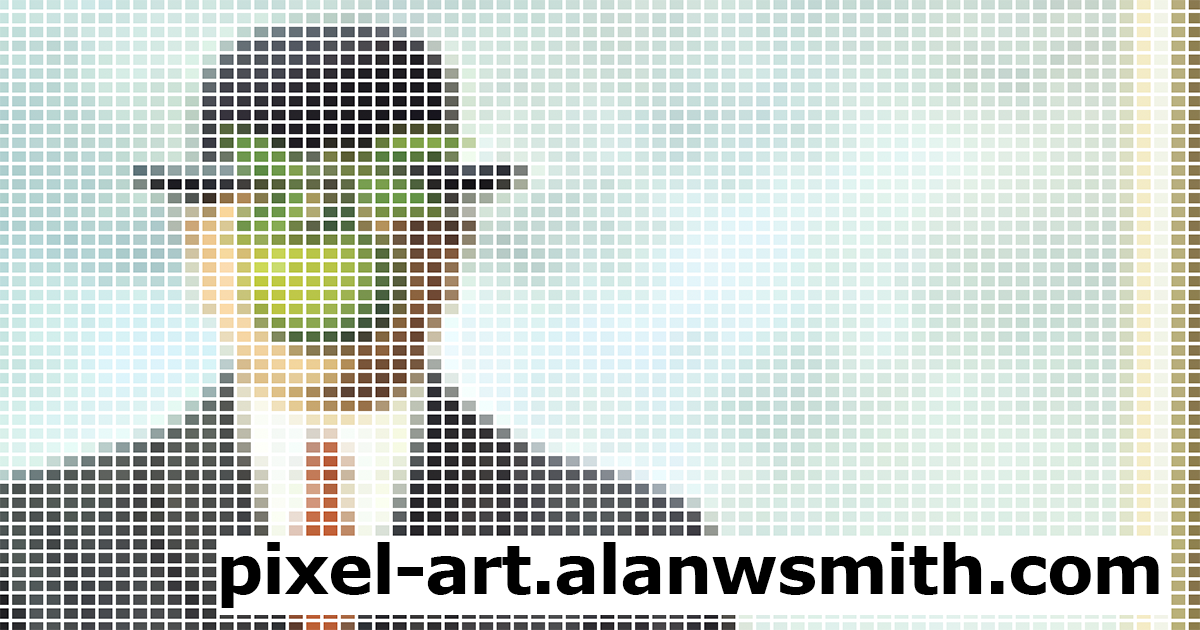
<style>
.page{position:relative;width:1200px;height:630px;background:#ffffff}
.page>*{position:absolute;margin:0}
.t1{font:68px "Verdana-Bold";letter-spacing:-0.02em;color:#000000}
</style>
<div class="page">
<p class="t1" style="left:221px;top:542px;width:938px;height:66px">pixel-art.alanwsmith.com</p>
</div>
